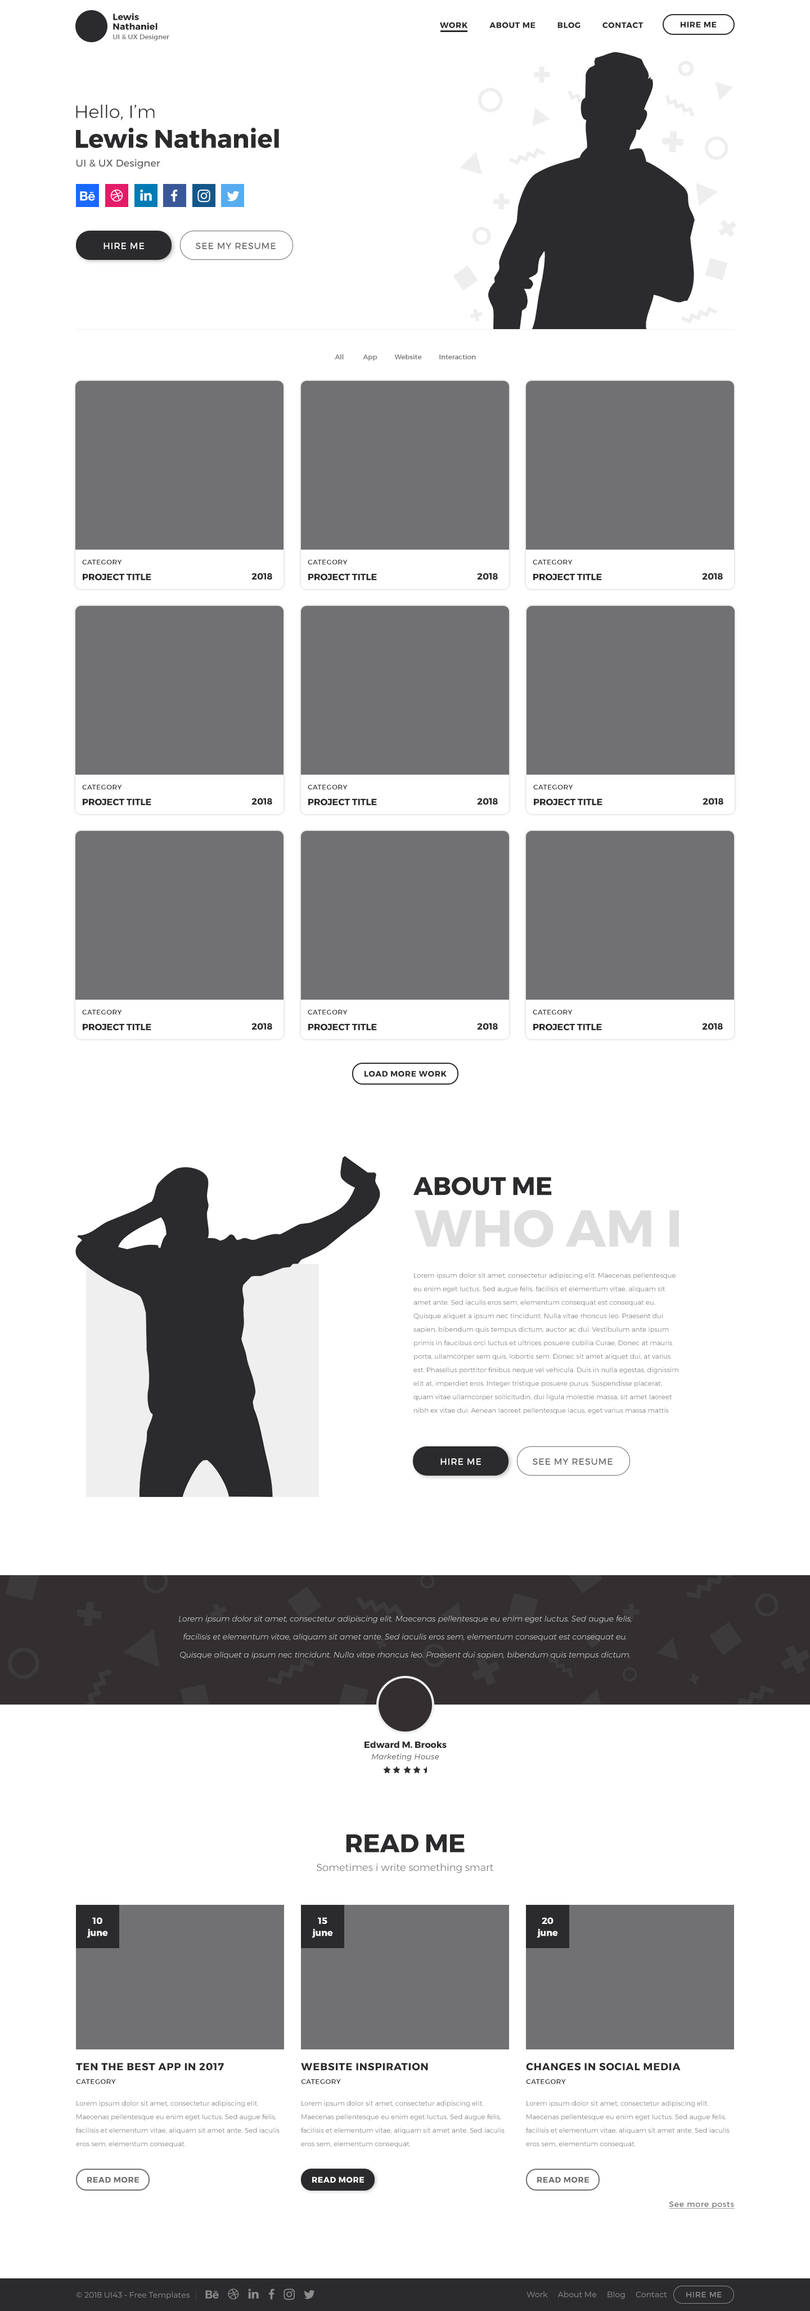
<style>
.page{position:relative;width:810px;height:2311px;background:#ffffff}
.page>*{position:absolute;margin:0}
.t1{font:9px/6.8px "Montserrat-Bold";color:#2b2a2c}
.t2{font:9px/8.4px "Montserrat-Bold";color:#2b2a2c}
.t3{font:7.9px "Montserrat-Bold";letter-spacing:0.05em;color:#2b2a2c}
.t4{font:6.8px "Montserrat-Regular";color:#6a696b}
.t5{font:25.3px/27px "Montserrat-Bold";color:#2b2a2c}
.t6{font:18px/8.4px "Montserrat-Light";color:#2b2a2c}
.t7{font:10.1px "Montserrat-Regular";color:#6a696b}
.t8{font:9px "Montserrat-Regular";letter-spacing:0.05em;color:#ffffff}
.t9{font:9px "Montserrat-Regular";letter-spacing:0.05em;color:#6a696b}
.t10{font:6.8px "Montserrat-Regular";letter-spacing:0.05em;color:#2b2a2c}
.t11{font:9px "Montserrat-Bold";color:#2b2a2c}
.t12{font:25.3px "Montserrat-Bold";color:#2b2a2c}
.t13{font:51.8px "Montserrat-Bold";color:#dedede}
.t14{font:6.8px/13.5px "Montserrat-Light";color:#717072}
.t15{font:7.9px/18px "Montserrat-ExtraLightItalic";color:#ffffff}
.t16{font:7.9px "Montserrat-Italic";color:#717072}
.t17{font:10.1px "Montserrat-Light";color:#717072}
.t18{font:9px/9px "Montserrat-Bold";color:#ffffff}
.t19{font:10.1px "Montserrat-Bold";letter-spacing:0.05em;color:#2b2a2c}
.t20{font:7.9px "Montserrat-Bold";letter-spacing:0.05em;color:#717072}
.t21{font:7.9px "Montserrat-Bold";letter-spacing:0.05em;color:#ffffff}
.t22{font:7.9px "Montserrat-Regular";letter-spacing:0.05em;color:#717072;text-decoration:underline}
.t23{font:7.9px "Montserrat-Regular";color:#8d8d8e}
.t24{font:7.9px "Montserrat-Regular";letter-spacing:0.05em;color:#8d8d8e}
</style>
<div class="page">
<p class="t1" style="left:113px;top:13px;width:45px;height:17px"><span class="t2">Lewis <br></span>Nathaniel</p>
<p class="t3" style="left:440px;top:22px;width:204px;height:6px">WORK          ABOUT ME          BLOG          CONTACT</p>
<p class="t3" style="left:681px;top:21px;width:36px;height:7px">HIRE ME</p>
<p class="t4" style="left:113px;top:34px;width:56px;height:6px">UI &amp; UX Designer</p>
<p class="t5" style="left:76px;top:105px;width:203px;height:43px"><span class="t6">Hello, I’m<br></span>Lewis Nathaniel</p>
<p class="t7" style="left:76px;top:159px;width:84px;height:10px">UI &amp; UX Designer</p>
<p class="t8" style="left:104px;top:242px;width:40px;height:7px">HIRE ME</p>
<p class="t9" style="left:195px;top:242px;width:81px;height:7px">SEE MY RESUME</p>
<p class="t4" style="left:335px;top:354px;width:141px;height:7px">All           App          Website          Interaction</p>
<p class="t10" style="left:82px;top:560px;width:40px;height:5px">CATEGORY</p>
<p class="t10" style="left:308px;top:560px;width:40px;height:5px">CATEGORY</p>
<p class="t10" style="left:533px;top:560px;width:40px;height:5px">CATEGORY</p>
<p class="t11" style="left:83px;top:573px;width:68px;height:7px">PROJECT TITLE</p>
<p class="t11" style="left:251px;top:573px;width:21px;height:7px">2018</p>
<p class="t11" style="left:308px;top:573px;width:69px;height:7px">PROJECT TITLE</p>
<p class="t11" style="left:477px;top:573px;width:21px;height:7px">2018</p>
<p class="t11" style="left:533px;top:573px;width:69px;height:7px">PROJECT TITLE</p>
<p class="t11" style="left:702px;top:573px;width:21px;height:7px">2018</p>
<p class="t10" style="left:82px;top:785px;width:40px;height:5px">CATEGORY</p>
<p class="t10" style="left:308px;top:785px;width:40px;height:5px">CATEGORY</p>
<p class="t10" style="left:533px;top:785px;width:40px;height:5px">CATEGORY</p>
<p class="t11" style="left:251px;top:798px;width:21px;height:7px">2018</p>
<p class="t11" style="left:477px;top:798px;width:21px;height:7px">2018</p>
<p class="t11" style="left:703px;top:798px;width:20px;height:7px">2018</p>
<p class="t11" style="left:83px;top:798px;width:68px;height:8px">PROJECT TITLE</p>
<p class="t11" style="left:308px;top:798px;width:69px;height:8px">PROJECT TITLE</p>
<p class="t11" style="left:534px;top:798px;width:68px;height:8px">PROJECT TITLE</p>
<p class="t10" style="left:82px;top:1010px;width:40px;height:5px">CATEGORY</p>
<p class="t10" style="left:308px;top:1010px;width:40px;height:5px">CATEGORY</p>
<p class="t10" style="left:533px;top:1010px;width:40px;height:5px">CATEGORY</p>
<p class="t11" style="left:83px;top:1023px;width:68px;height:7px">PROJECT TITLE</p>
<p class="t11" style="left:251px;top:1023px;width:21px;height:7px">2018</p>
<p class="t11" style="left:308px;top:1023px;width:69px;height:7px">PROJECT TITLE</p>
<p class="t11" style="left:477px;top:1023px;width:21px;height:7px">2018</p>
<p class="t11" style="left:533px;top:1023px;width:69px;height:7px">PROJECT TITLE</p>
<p class="t11" style="left:702px;top:1023px;width:21px;height:7px">2018</p>
<p class="t3" style="left:364px;top:1070px;width:83px;height:7px">LOAD MORE WORK</p>
<p class="t12" style="left:413px;top:1177px;width:139px;height:18px">ABOUT ME</p>
<p class="t13" style="left:414px;top:1209px;width:265px;height:39px">WHO AM I</p>
<p class="t14" style="left:413px;top:1272px;width:265px;height:142px">Lorem ipsum dolor sit amet, consectetur adipiscing elit. Maecenas pellentesque eu enim eget luctus. Sed augue felis, facilisis et elementum vitae, aliquam sit amet ante. Sed iaculis eros sem, elementum consequat est consequat eu. Quisque aliquet a ipsum nec tincidunt. Nulla vitae rhoncus leo. Praesent dui sapien, bibendum quis tempus dictum, auctor ac dui. Vestibulum ante ipsum primis in faucibus orci luctus et ultrices posuere cubilia Curae; Donec at mauris porta, ullamcorper sem quis, lobortis sem. Donec sit amet aliquet dui, at varius est. Phasellus porttitor finibus neque vel vehicula. Duis in nulla egestas, dignissim elit at, imperdiet eros. Integer tristique posuere purus. Suspendisse placerat, quam vitae ullamcorper sollicitudin, dui ligula molestie massa, sit amet laoreet nibh ex vitae dui. Aenean laoreet pellentesque lacus, eget varius massa mattis quis. Nunc ultrices urna eu nunc lobortis pulvinar. Duis viverra, quam non imperdiet scelerisque, urna nunc consequat velit, in mollis erat nibh in libero.</p>
<p class="t8" style="left:440px;top:1458px;width:41px;height:7px">HIRE ME</p>
<p class="t9" style="left:532px;top:1458px;width:81px;height:7px">SEE MY RESUME</p>
<p class="t15" style="left:179px;top:1615px;width:452px;height:44px;text-align:center">Lorem ipsum dolor sit amet, consectetur adipiscing elit. Maecenas pellentesque eu enim eget luctus. Sed augue felis, facilisis et elementum vitae, aliquam sit amet ante. Sed iaculis eros sem, elementum consequat est consequat eu. Quisque aliquet a ipsum nec tincidunt. Nulla vitae rhoncus leo. Praesent dui sapien, bibendum quis tempus dictum.</p>
<p class="t11" style="left:364px;top:1741px;width:83px;height:7px">Edward M. Brooks</p>
<p class="t16" style="left:371px;top:1753px;width:68px;height:8px">Marketing House</p>
<p class="t12" style="left:346px;top:1834px;width:119px;height:18px">READ ME</p>
<p class="t17" style="left:316px;top:1863px;width:177px;height:10px">Sometimes i write something smart</p>
<p class="t18" style="left:87px;top:1917px;width:21px;height:21px;text-align:center">10<br>june</p>
<p class="t18" style="left:312px;top:1917px;width:21px;height:21px;text-align:center">15<br>june</p>
<p class="t18" style="left:537px;top:1917px;width:21px;height:21px;text-align:center">20<br>june</p>
<p class="t19" style="left:76px;top:2063px;width:148px;height:8px">TEN THE BEST APP IN 2017</p>
<p class="t19" style="left:301px;top:2063px;width:127px;height:8px">WEBSITE INSPIRATION</p>
<p class="t19" style="left:526px;top:2063px;width:155px;height:8px">CHANGES IN SOCIAL MEDIA</p>
<p class="t10" style="left:76px;top:2079px;width:40px;height:5px">CATEGORY</p>
<p class="t10" style="left:301px;top:2079px;width:40px;height:5px">CATEGORY</p>
<p class="t10" style="left:526px;top:2079px;width:40px;height:5px">CATEGORY</p>
<p class="t14" style="left:76px;top:2100px;width:204px;height:48px">Lorem ipsum dolor sit amet, consectetur adipiscing elit. Maecenas pellentesque eu enim eget luctus. Sed augue felis, facilisis et elementum vitae, aliquam sit amet ante. Sed iaculis eros sem, elementum consequat.</p>
<p class="t14" style="left:301px;top:2100px;width:204px;height:48px">Lorem ipsum dolor sit amet, consectetur adipiscing elit. Maecenas pellentesque eu enim eget luctus. Sed augue felis, facilisis et elementum vitae, aliquam sit amet ante. Sed iaculis eros sem, elementum consequat.</p>
<p class="t14" style="left:526px;top:2100px;width:204px;height:48px">Lorem ipsum dolor sit amet, consectetur adipiscing elit. Maecenas pellentesque eu enim eget luctus. Sed augue felis, facilisis et elementum vitae, aliquam sit amet ante. Sed iaculis eros sem, elementum consequat.</p>
<p class="t20" style="left:87px;top:2176px;width:52px;height:6px">READ MORE</p>
<p class="t21" style="left:312px;top:2176px;width:52px;height:6px">READ MORE</p>
<p class="t20" style="left:537px;top:2176px;width:52px;height:6px">READ MORE</p>
<p class="t22" style="left:669px;top:2201px;width:66px;height:7px">See more posts</p>
<p class="t23" style="left:76px;top:2291px;width:114px;height:8px">© 2018 UI43 - Free Templates</p>
<p class="t23" style="left:526px;top:2291px;width:141px;height:8px">Work     About Me     Blog     Contact</p>
<p class="t24" style="left:686px;top:2292px;width:36px;height:5px">HIRE ME</p>
</div>
